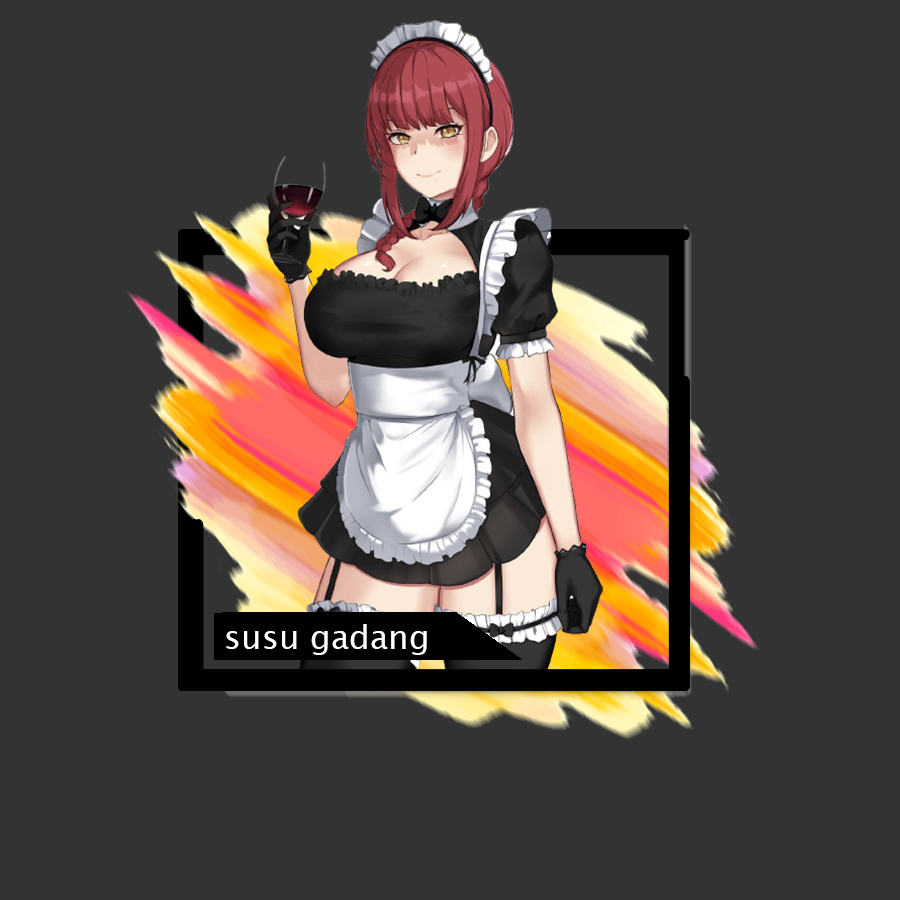
<style>
.page{position:relative;width:900px;height:900px;background:#333333}
.page>*{position:absolute;margin:0}
.t1{font:33.3px "LucidaSansUnicode";color:#ffffff}
</style>
<div class="page">
<p class="t1" style="left:226px;top:624px;width:201px;height:31px">susu gadang</p>
</div>
